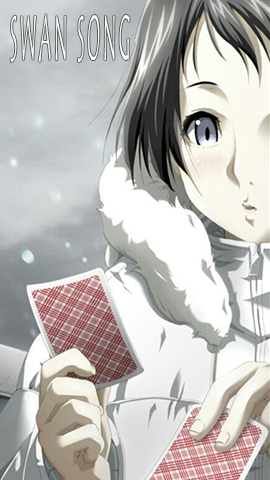
<style>
.page{position:relative;width:270px;height:480px}
.page>*{position:absolute;margin:0}
.t1{font:63.6px "TempusSansITC";letter-spacing:0.2em;color:#ffffff;scale:0.25 1}
</style>
<div class="page">
<p class="t1" style="left:10px;top:14px;width:120px;height:48px">SWAN SONG</p>
</div>
